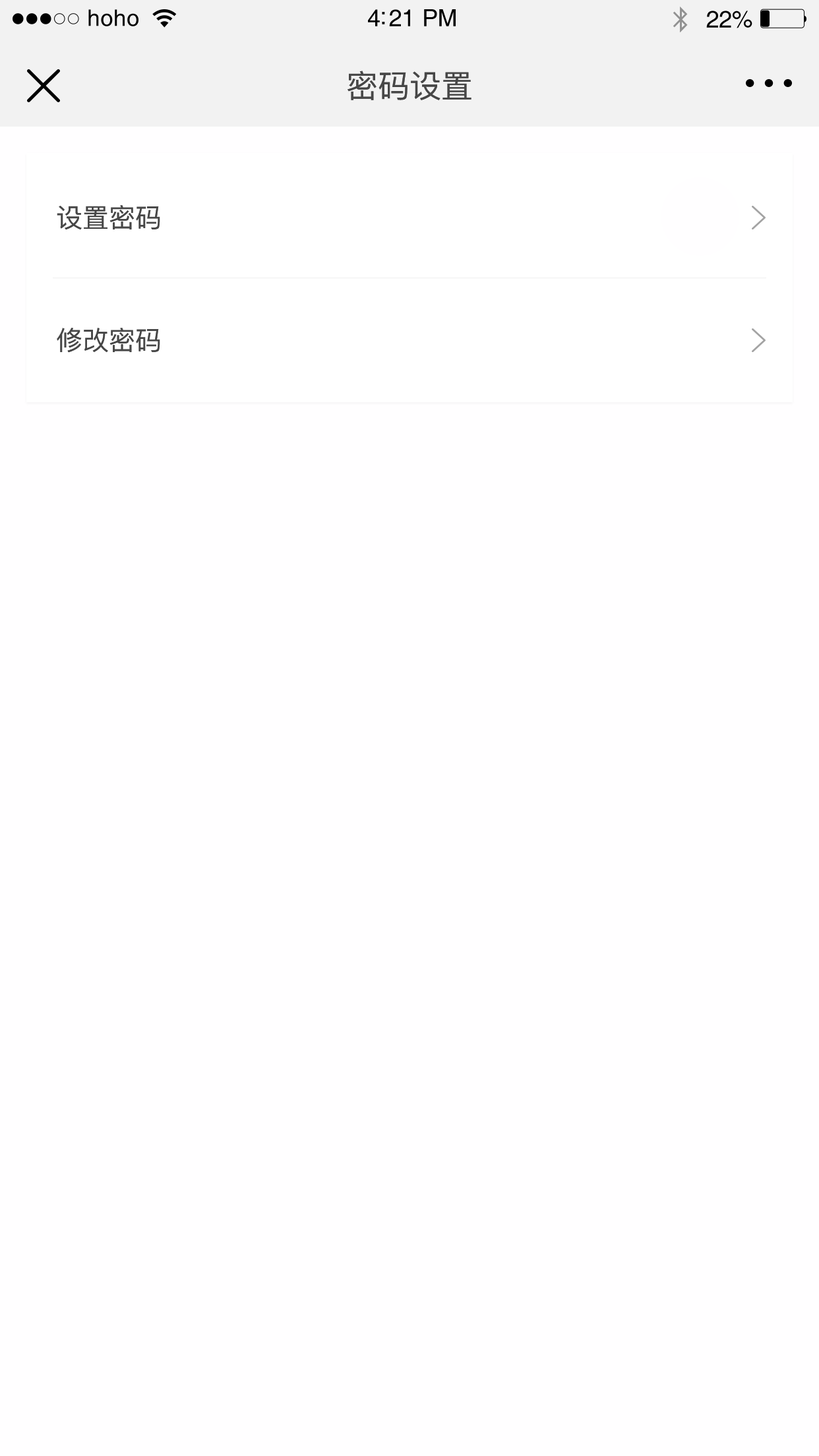
<style>
.page{position:relative;width:819px;height:1456px;background:#fffeff}
.page>*{position:absolute;margin:0}
.t1{font:22.8px "Helvetica";letter-spacing:0.02em;color:#000000}
.t2{font:23.8px "Helvetica";letter-spacing:-0.02em;color:#000000}
.t3{font:31.7px "PingFang-SC-Medium";color:#474747}
.t4{font:26.4px "PingFang-SC-Medium";color:#474747}
</style>
<div class="page">
<p class="t1" style="left:88px;top:9px;width:50px;height:17px">hoho</p>
<p class="t2" style="left:368px;top:9px;width:88px;height:17px">4:21 PM</p>
<p class="t2" style="left:706px;top:11px;width:46px;height:17px">22%</p>
<p class="t3" style="left:348px;top:71px;width:123px;height:29px">密码设置</p>
<p class="t4" style="left:57px;top:205px;width:103px;height:25px">设置密码</p>
<p class="t4" style="left:57px;top:328px;width:103px;height:25px">修改密码</p>
</div>
